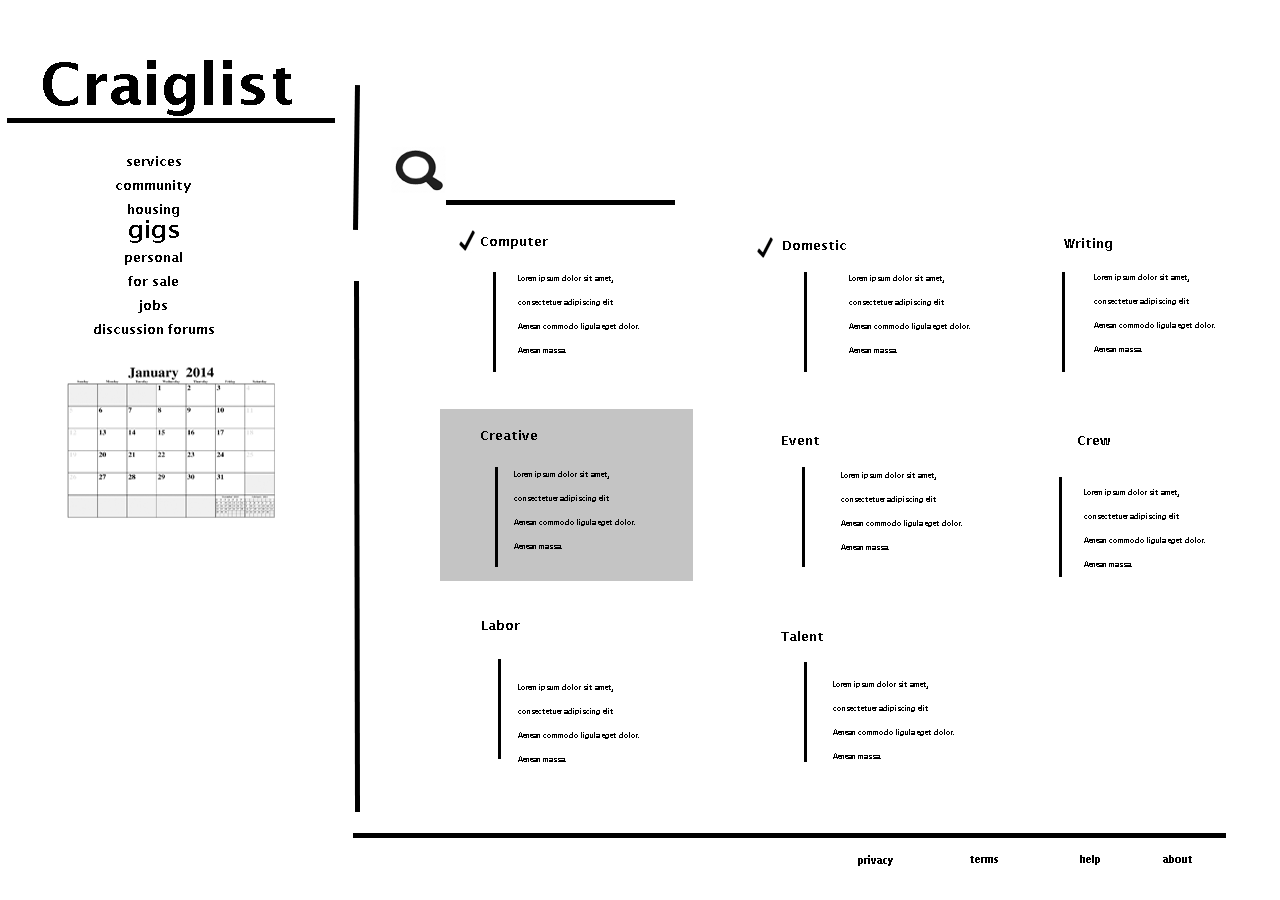
<style>
.page{position:relative;width:1280px;height:900px;background:#ffffff}
.page>*{position:absolute;margin:0}
.t1{font:13px/24px "LucidaSans-Demi";color:#000000}
.t2{font:24px/24px "LucidaSans-Demi";color:#000000}
.t3{font:13px "LucidaSans-Demi";color:#000000}
.t4{font:7px/24px "LucidaSans-Demi";color:#000000}
.t5{font:10px "LucidaSans-Demi";color:#000000}
</style>
<div class="page">
<p class="t1" style="left:94px;top:156px;width:120px;height:178px;text-align:center">services<br>community<br>housing<br><span class="t2">gigs<br></span>personal<br>for sale<br>jobs<br>discussion forums</p>
<p class="t3" style="left:481px;top:237px;width:67px;height:12px">Computer</p>
<p class="t3" style="left:783px;top:240px;width:63px;height:10px">Domestic</p>
<p class="t3" style="left:1064px;top:238px;width:48px;height:13px">Writing</p>
<p class="t4" style="left:518px;top:275px;width:121px;height:78px">Lorem ipsum dolor sit amet,<br>consectetuer adipiscing elit<br>Aenean commodo ligula eget dolor. <br>Aenean massa.</p>
<p class="t4" style="left:849px;top:275px;width:121px;height:78px">Lorem ipsum dolor sit amet,<br>consectetuer adipiscing elit<br>Aenean commodo ligula eget dolor. <br>Aenean massa.</p>
<p class="t4" style="left:1094px;top:274px;width:121px;height:78px">Lorem ipsum dolor sit amet,<br>consectetuer adipiscing elit<br>Aenean commodo ligula eget dolor. <br>Aenean massa.</p>
<p class="t3" style="left:481px;top:430px;width:56px;height:10px">Creative</p>
<p class="t3" style="left:782px;top:436px;width:37px;height:9px">Event</p>
<p class="t3" style="left:1078px;top:436px;width:32px;height:9px">Crew</p>
<p class="t4" style="left:514px;top:471px;width:121px;height:78px">Lorem ipsum dolor sit amet,<br>consectetuer adipiscing elit<br>Aenean commodo ligula eget dolor. <br>Aenean massa.</p>
<p class="t4" style="left:841px;top:472px;width:121px;height:78px">Lorem ipsum dolor sit amet,<br>consectetuer adipiscing elit<br>Aenean commodo ligula eget dolor. <br>Aenean massa.</p>
<p class="t4" style="left:1084px;top:489px;width:121px;height:78px">Lorem ipsum dolor sit amet,<br>consectetuer adipiscing elit<br>Aenean commodo ligula eget dolor. <br>Aenean massa.</p>
<p class="t3" style="left:482px;top:620px;width:38px;height:10px">Labor</p>
<p class="t3" style="left:781px;top:631px;width:42px;height:10px">Talent</p>
<p class="t4" style="left:518px;top:684px;width:121px;height:78px">Lorem ipsum dolor sit amet,<br>consectetuer adipiscing elit<br>Aenean commodo ligula eget dolor. <br>Aenean massa.</p>
<p class="t4" style="left:833px;top:681px;width:121px;height:78px">Lorem ipsum dolor sit amet,<br>consectetuer adipiscing elit<br>Aenean commodo ligula eget dolor. <br>Aenean massa.</p>
<p class="t5" style="left:858px;top:855px;width:35px;height:11px">privacy</p>
<p class="t5" style="left:970px;top:856px;width:28px;height:7px">terms</p>
<p class="t5" style="left:1080px;top:855px;width:20px;height:10px">help</p>
<p class="t5" style="left:1163px;top:855px;width:29px;height:8px">about</p>
</div>
